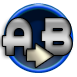
<style>
.page{position:relative;width:77px;height:77px;background:#ffffff}
.page>*{position:absolute;margin:0}
.t1{font:46px "RedCircle";scale:0.83 1}
</style>
<div class="page">
<p class="t1" style="left:2px;top:18px;width:70px;height:37px">A B</p>
</div>
